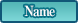
<style>
.page{position:relative;width:78px;height:23px;background:#115777}
.page>*{position:absolute;margin:0}
.t1{font:14px "RyuminPro-ExBold";letter-spacing:-0.08em;color:#ffffff;scale:0.9 1}
</style>
<div class="page">
<p class="t1" style="left:24px;top:5px;width:31px;height:12px">Name</p>
</div>
